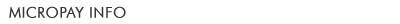
<style>
.page{position:relative;width:400px;height:24px;background:#ffffff}
.page>*{position:absolute;margin:0}
.t1{font:14.7px "FuturaBT-Light";letter-spacing:0.025em;color:#363636;text-transform:uppercase;font-weight:bold}
</style>
<div class="page">
<p class="t1" style="left:9px;top:6px;width:117px;height:12px">MICROPAY INFO</p>
</div>
